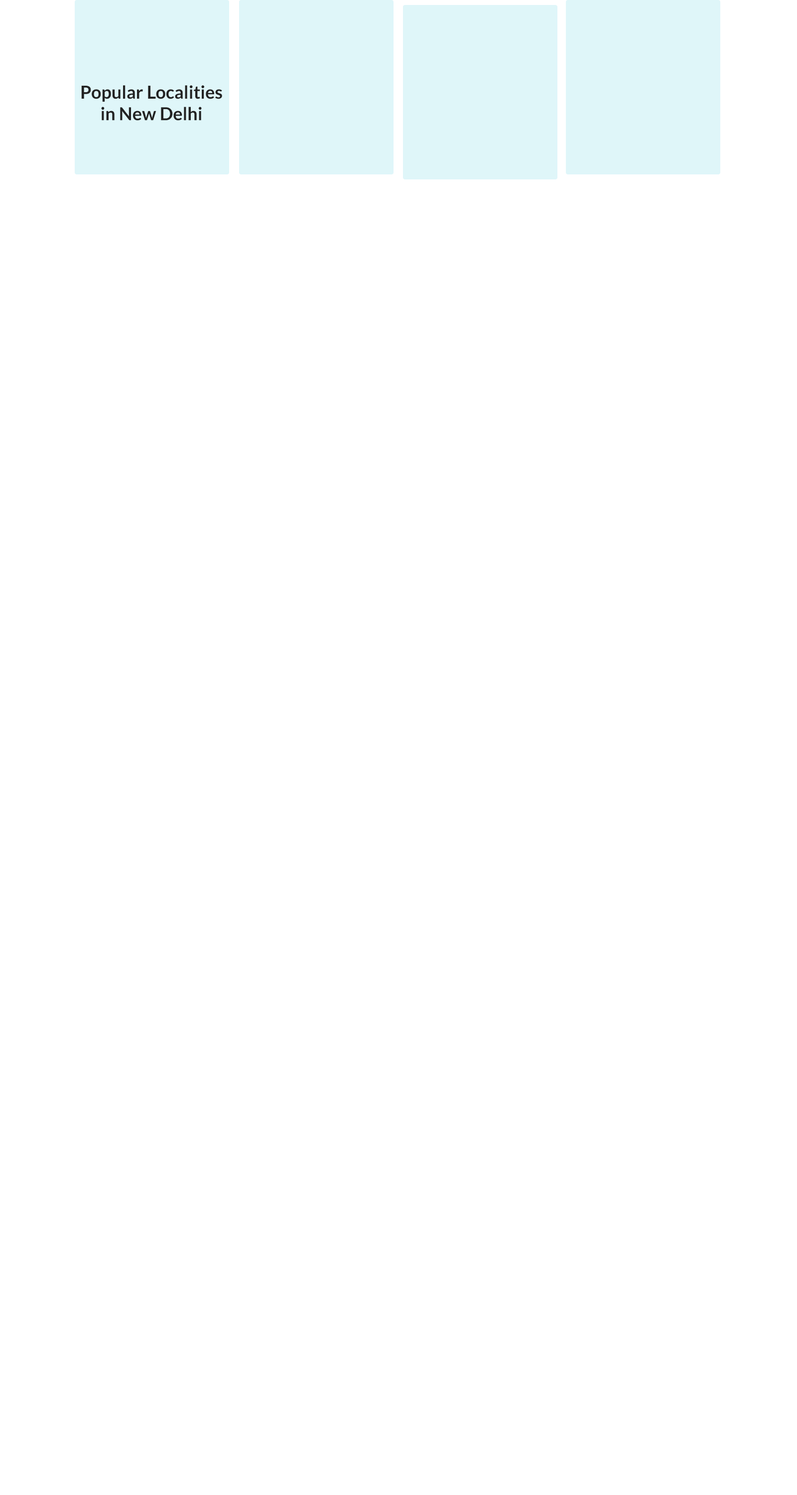
<style>
.page{position:relative;width:797px;height:1495px;background:#ffffff}
.page>*{position:absolute;margin:0}
.t1{font:17.9px "Lato-Bold";color:#222222}
</style>
<div class="page">
<p class="t1" style="left:81px;top:85px;width:141px;height:36px;text-align:center">Popular Localities<br>in New Delhi</p>
</div>
